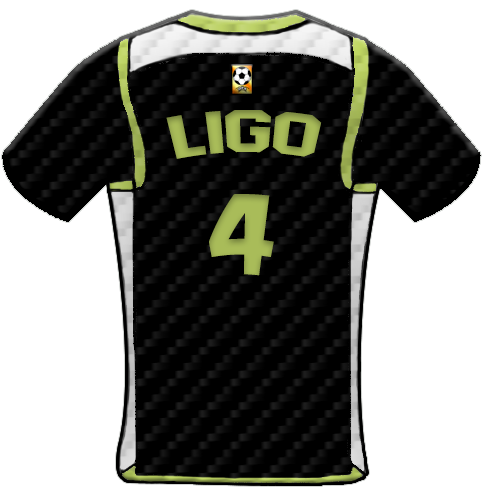
<style>
.page{position:relative;width:482px;height:494px;background:#ffffff}
.page>*{position:absolute;margin:0}
.t1{font:59.4px "AdidasHalfBlock2016";color:#a9bc59;scale:1.13 1}
.t2{font:113.8px "AdidasHalfBlock2016";color:#a9bc59}
</style>
<div class="page">
<p class="t1" style="left:166px;top:110px;width:156px;height:49px">Ligo</p>
<p class="t2" style="left:209px;top:194px;width:65px;height:82px">4</p>
</div>
